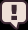
<style>
.page{position:relative;width:28px;height:30px;background:#eedfd7}
.page>*{position:absolute;margin:0}
.t1{font:22px "Rockwell-ExtraBold";color:#3b2732}
</style>
<div class="page">
<p class="t1" style="left:11px;top:4px;width:6px;height:16px">!</p>
</div>
